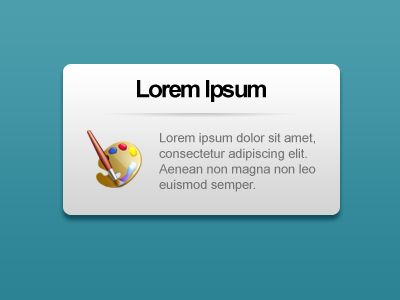
<style>
.page{position:relative;width:400px;height:300px}
.page>*{position:absolute;margin:0}
.t1{font:24px "Arial-BoldMT";letter-spacing:-0.075em;color:#000000}
.t2{font:13px "ArialMT";letter-spacing:-0.01em;color:#747474}
</style>
<div class="page">
<p class="t1" style="left:137px;top:80px;width:129px;height:22px">Lorem Ipsum</p>
<p class="t2" style="left:159px;top:133px;width:157px;height:59px">Lorem ipsum dolor sit amet, consectetur adipiscing elit. Aenean non magna non leo euismod semper.</p>
</div>
